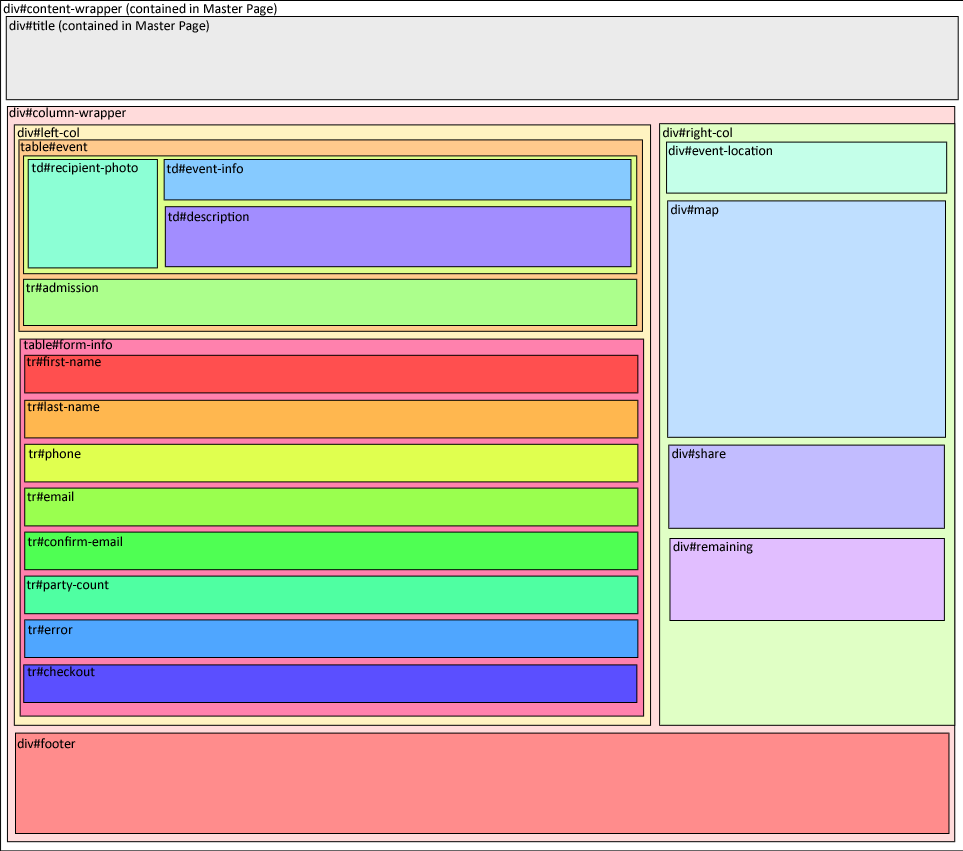
<style>
.page{position:relative;width:963px;height:851px}
.page>*{position:absolute;margin:0}
.t1{font:14px "Calibri";letter-spacing:-0.005em;color:#000000}
</style>
<div class="page">
<p class="t1" style="left:3px;top:3px;width:274px;height:13px">div#content-wrapper (contained in Master Page)</p>
<p class="t1" style="left:9px;top:20px;width:200px;height:13px">div#title (contained in Master Page)</p>
<p class="t1" style="left:9px;top:107px;width:117px;height:13px">div#column-wrapper</p>
<p class="t1" style="left:17px;top:127px;width:62px;height:11px">div#left-col</p>
<p class="t1" style="left:663px;top:127px;width:69px;height:13px">div#right-col</p>
<p class="t1" style="left:20px;top:141px;width:68px;height:11px">table#event</p>
<p class="t1" style="left:668px;top:145px;width:104px;height:11px">div#event-location</p>
<p class="t1" style="left:31px;top:162px;width:107px;height:13px">td#recipient-photo</p>
<p class="t1" style="left:166px;top:163px;width:77px;height:11px">td#event-info</p>
<p class="t1" style="left:671px;top:204px;width:48px;height:13px">div#map</p>
<p class="t1" style="left:168px;top:211px;width:81px;height:13px">td#description</p>
<p class="t1" style="left:26px;top:282px;width:72px;height:11px">tr#admission</p>
<p class="t1" style="left:23px;top:339px;width:89px;height:11px">table#form-info</p>
<p class="t1" style="left:26px;top:356px;width:75px;height:11px">tr#first-name</p>
<p class="t1" style="left:27px;top:401px;width:73px;height:11px">tr#last-name</p>
<p class="t1" style="left:28px;top:448px;width:53px;height:13px">tr#phone</p>
<p class="t1" style="left:672px;top:448px;width:54px;height:11px">div#share</p>
<p class="t1" style="left:27px;top:491px;width:47px;height:11px">tr#email</p>
<p class="t1" style="left:27px;top:536px;width:95px;height:11px">tr#confirm-email</p>
<p class="t1" style="left:673px;top:541px;width:80px;height:13px">div#remaining</p>
<p class="t1" style="left:26px;top:580px;width:83px;height:12px">tr#party-count</p>
<p class="t1" style="left:28px;top:625px;width:45px;height:10px">tr#error</p>
<p class="t1" style="left:27px;top:666px;width:68px;height:11px">tr#checkout</p>
<p class="t1" style="left:17px;top:738px;width:59px;height:11px">div#footer</p>
</div>
